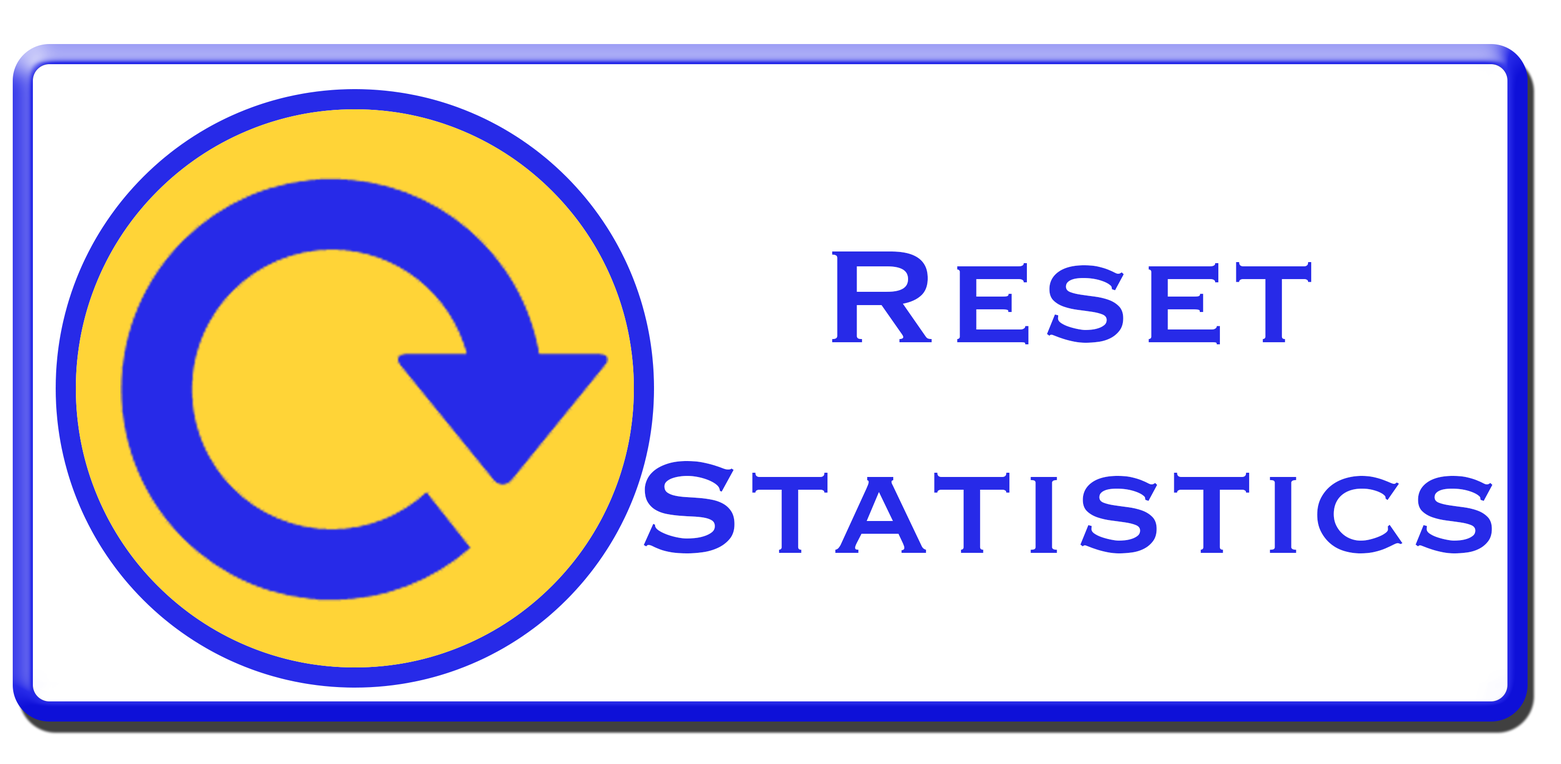
<style>
.page{position:relative;width:1561px;height:764px;background:#ffffff}
.page>*{position:absolute;margin:0}
.t1{font:172.4px "Copperplate";color:#272ae8}
</style>
<div class="page">
<p class="t1" style="left:643px;top:251px;width:850px;height:302px;text-align:center">Reset<br>Statistics</p>
</div>
